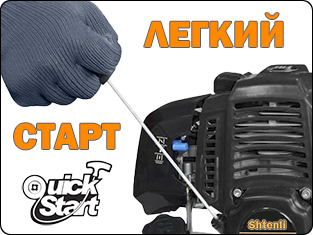
<style>
.page{position:relative;width:313px;height:235px;background:#ffffff}
.page>*{position:absolute;margin:0}
.t1{font:38px "FranklinGothic-Heavy";color:#ff8a00}
</style>
<div class="page">
<p class="t1" style="left:144px;top:13px;width:139px;height:34px">ЛЕГКИЙ</p>
<p class="t1" style="left:14px;top:123px;width:106px;height:27px">СТАРТ</p>
</div>
